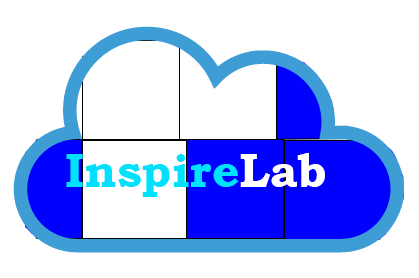
<style>
.page{position:relative;width:419px;height:278px;background:#ffffff}
.page>*{position:absolute;margin:0}
.t1{font:48px "BookmanOldStyle-Bold";color:#01e0fd}
.t2{font:48px "BookmanOldStyle-Bold";color:#ffffff}
</style>
<div class="page">
<p class="t1" style="left:66px;top:153px;width:259px;height:44px">Inspire<span class="t2">Lab</span></p>
</div>
